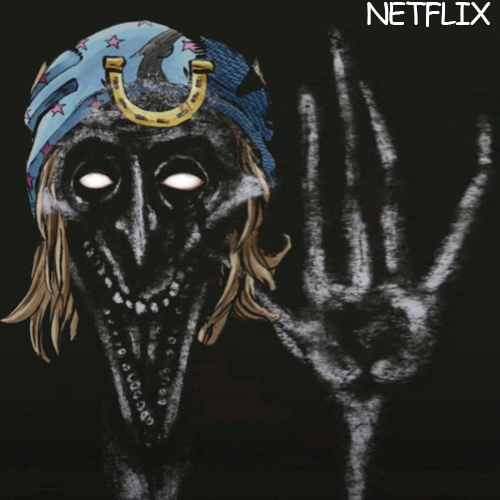
<style>
.page{position:relative;width:500px;height:500px}
.page>*{position:absolute;margin:0}
.t1{font:30.9px "ComicSansMS";letter-spacing:-0.06em;color:#ffffff}
</style>
<div class="page">
<p class="t1" style="left:367px;top:1px;width:124px;height:26px">NETFLIX</p>
</div>
